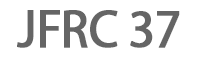
<style>
.page{position:relative;width:202px;height:61px;background:#ffffff}
.page>*{position:absolute;margin:0}
.t1{font:54.3px "MyriadPro-Regular";letter-spacing:-0.025em;color:#656565;text-transform:uppercase;font-weight:bold;scale:0.93 1}
</style>
<div class="page">
<p class="t1" style="left:17px;top:10px;width:163px;height:38px">JFRC 37</p>
</div>
